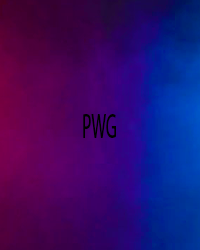
<style>
.page{position:relative;width:200px;height:250px}
.page>*{position:absolute;margin:0}
.t1{font:34.3px "MyriadPro-Regular";color:#000000;scale:0.51 1}
</style>
<div class="page">
<p class="t1" style="left:83px;top:114px;width:33px;height:24px">PWG</p>
</div>
